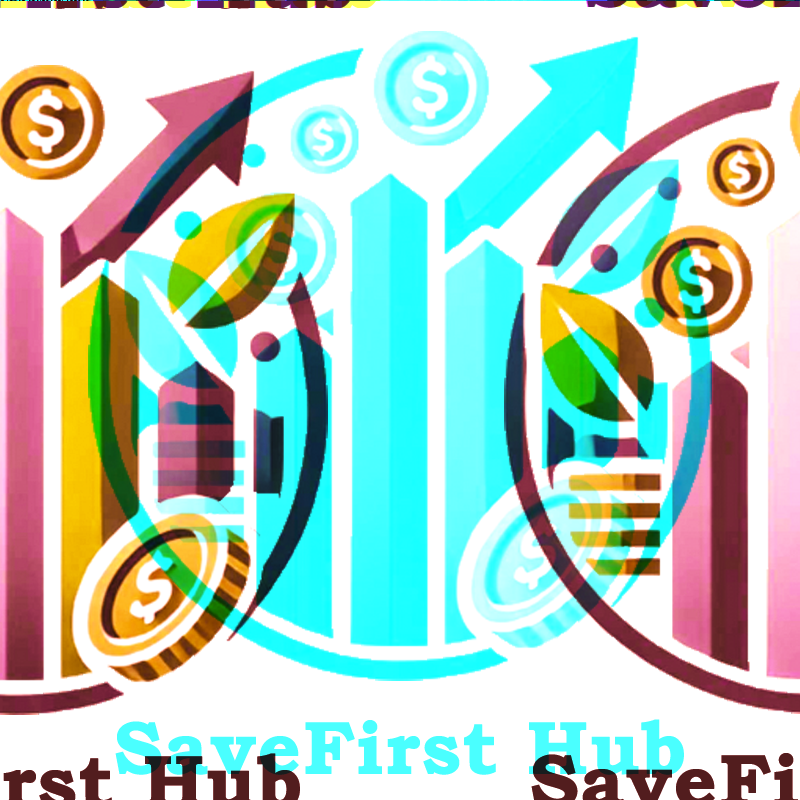
<style>
.page{position:relative;width:800px;height:800px;background:#ffffff}
.page>*{position:absolute;margin:0}
.t1{font:75px "BookmanOldStyle-Bold";color:#4affff;font-weight:bold}
</style>
<div class="page">
<p class="t1" style="left:115px;top:718px;width:569px;height:56px">SaveFirst Hub</p>
</div>
